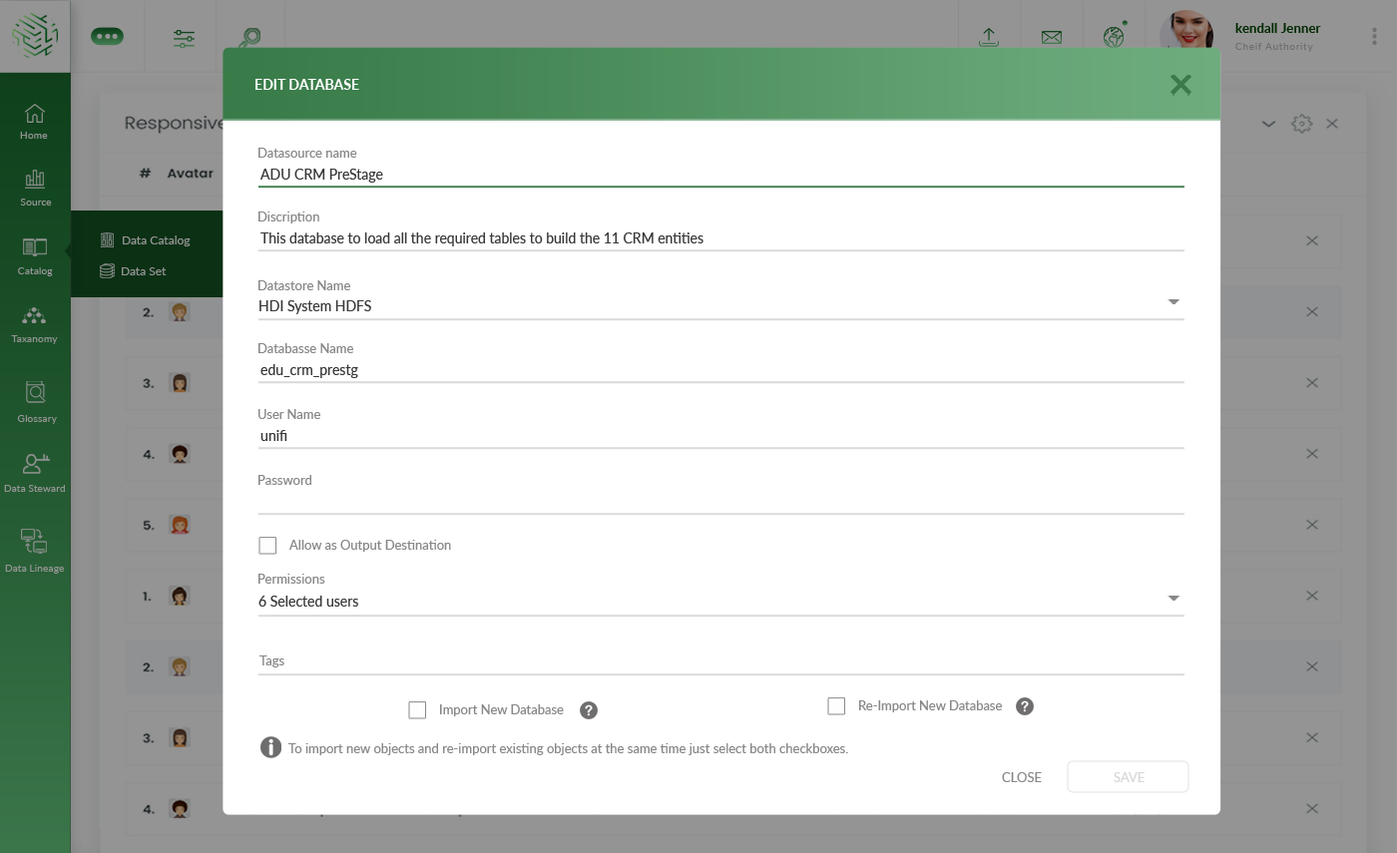
<style>
.page{position:relative;width:1397px;height:853px;background:#ffffff}
.page>*{position:absolute;margin:0}
.t1{font:13.3px "Lato-Bold";color:#032a03}
.t2{font:10.2px "Lato-Regular";letter-spacing:0.05em;color:#6f6f6f}
.t3{font:14px "Lato-Bold";color:#ffffff}
.t4{font:10.2px "Lato-Regular";color:#949494}
.t5{font:13px "Lato-Regular";color:#898888}
.t6{font:14px "Lato-Regular";color:#393838}
.t7{font:12px "Lato-Regular";color:#949494}
.t8{font:13px "Lato-Regular";color:#d8d6d6}
</style>
<div class="page">
<p class="t1" style="left:1236px;top:23px;width:85px;height:10px">kendall Jenner</p>
<p class="t2" style="left:1236px;top:43px;width:77px;height:9px">Cheif Authority</p>
<p class="t3" style="left:256px;top:79px;width:103px;height:11px">EDIT DATABASE</p>
<p class="t4" style="left:20px;top:132px;width:28px;height:7px">Home</p>
<p class="t5" style="left:259px;top:148px;width:98px;height:10px">Datasource name</p>
<p class="t6" style="left:260px;top:169px;width:123px;height:14px">ADU CRM PreStage</p>
<p class="t4" style="left:20px;top:199px;width:32px;height:7px">Source</p>
<p class="t5" style="left:259px;top:212px;width:60px;height:12px">Discription</p>
<p class="t6" style="left:261px;top:233px;width:443px;height:14px">This database to load all the required tables to build the 11 CRM entities</p>
<p class="t7" style="left:123px;top:236px;width:68px;height:11px">Data Catalog</p>
<p class="t4" style="left:18px;top:267px;width:35px;height:9px">Catalog</p>
<p class="t7" style="left:122px;top:267px;width:45px;height:8px">Data Set</p>
<p class="t5" style="left:259px;top:280px;width:91px;height:10px">Datastore Name</p>
<p class="t6" style="left:260px;top:300px;width:111px;height:14px">HDI System HDFS</p>
<p class="t4" style="left:11px;top:335px;width:47px;height:9px">Taxanomy</p>
<p class="t5" style="left:259px;top:343px;width:94px;height:10px">Databasse Name</p>
<p class="t6" style="left:261px;top:364px;width:97px;height:14px">edu_crm_prestg</p>
<p class="t5" style="left:259px;top:409px;width:61px;height:10px">User Name</p>
<p class="t4" style="left:17px;top:415px;width:40px;height:9px">Glossary</p>
<p class="t6" style="left:261px;top:430px;width:26px;height:11px">unifi</p>
<p class="t4" style="left:4px;top:485px;width:61px;height:7px">Data Steward</p>
<p class="t5" style="left:259px;top:475px;width:52px;height:10px">Password</p>
<p class="t5" style="left:288px;top:540px;width:163px;height:12px">Allow as Output Destination</p>
<p class="t4" style="left:5px;top:565px;width:59px;height:9px">Data Lineage</p>
<p class="t5" style="left:259px;top:574px;width:66px;height:10px">Permissions</p>
<p class="t6" style="left:259px;top:596px;width:99px;height:11px">6 Selected users</p>
<p class="t5" style="left:260px;top:656px;width:24px;height:12px">Tags</p>
<p class="t5" style="left:859px;top:701px;width:143px;height:12px">Re-Import New Database</p>
<p class="t5" style="left:440px;top:705px;width:124px;height:12px">Import New Database</p>
<p class="t5" style="left:288px;top:744px;width:560px;height:12px">To import new objects and re-import existing objects at the same time just select both checkboxes.</p>
<p class="t5" style="left:1002px;top:773px;width:40px;height:10px">CLOSE</p>
<p class="t8" style="left:1114px;top:773px;width:31px;height:10px">SAVE</p>
</div>
